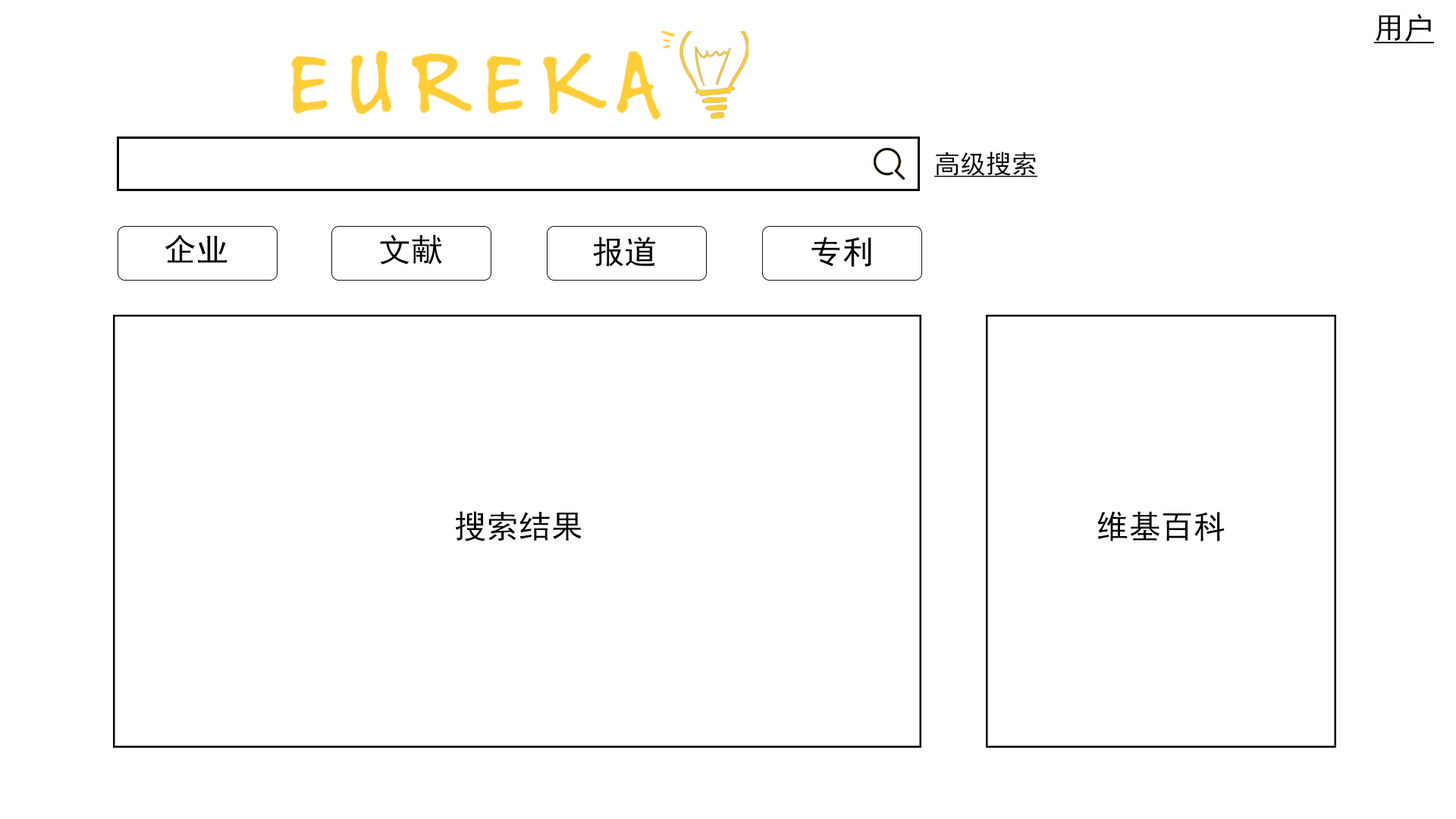
<style>
.page{position:relative;width:1456px;height:819px;background:#ffffff}
.page>*{position:absolute;margin:0}
.t1{font:30.1px "SimHei";color:#020202;text-decoration:underline}
.t2{font:25.8px "SimHei";color:#020202;text-decoration:underline}
.t3{font:32.2px "SimHei";color:#020202}
</style>
<div class="page">
<p class="t1" style="left:1373px;top:14px;width:61px;height:30px">用户</p>
<p class="t2" style="left:934px;top:152px;width:104px;height:25px">高级搜索</p>
<p class="t3" style="left:165px;top:234px;width:62px;height:29px">企业</p>
<p class="t3" style="left:380px;top:234px;width:62px;height:31px">文献</p>
<p class="t3" style="left:593px;top:237px;width:62px;height:30px">报道</p>
<p class="t3" style="left:811px;top:237px;width:60px;height:30px">专利</p>
<p class="t3" style="left:455px;top:511px;width:127px;height:30px">搜索结果</p>
<p class="t3" style="left:1097px;top:511px;width:128px;height:30px">维基百科</p>
</div>
